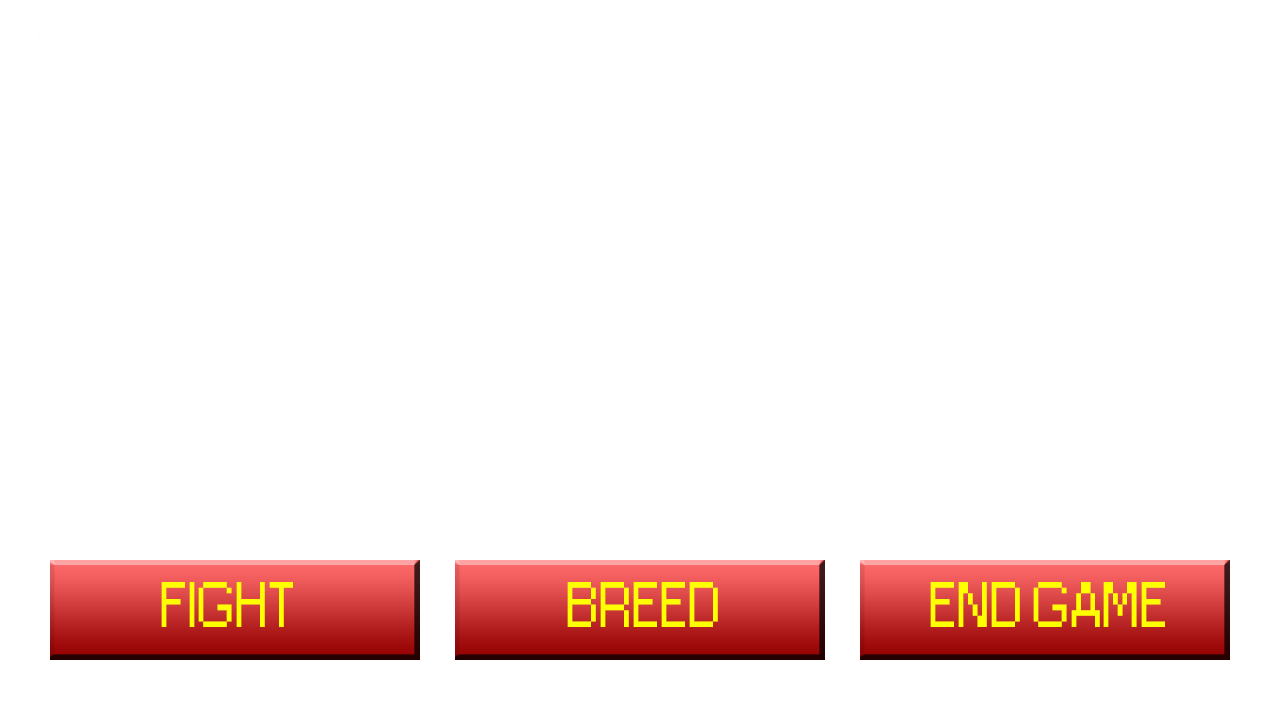
<style>
.page{position:relative;width:1280px;height:720px;background:#ffffff}
.page>*{position:absolute;margin:0}
.t1{font:60px "Small Fonts";color:#ffff00}
</style>
<div class="page">
<p class="t1" style="left:161px;top:582px;width:132px;height:45px">FIGHT</p>
<p class="t1" style="left:567px;top:582px;width:151px;height:45px">BREED</p>
<p class="t1" style="left:930px;top:582px;width:235px;height:45px">END GAME</p>
</div>
